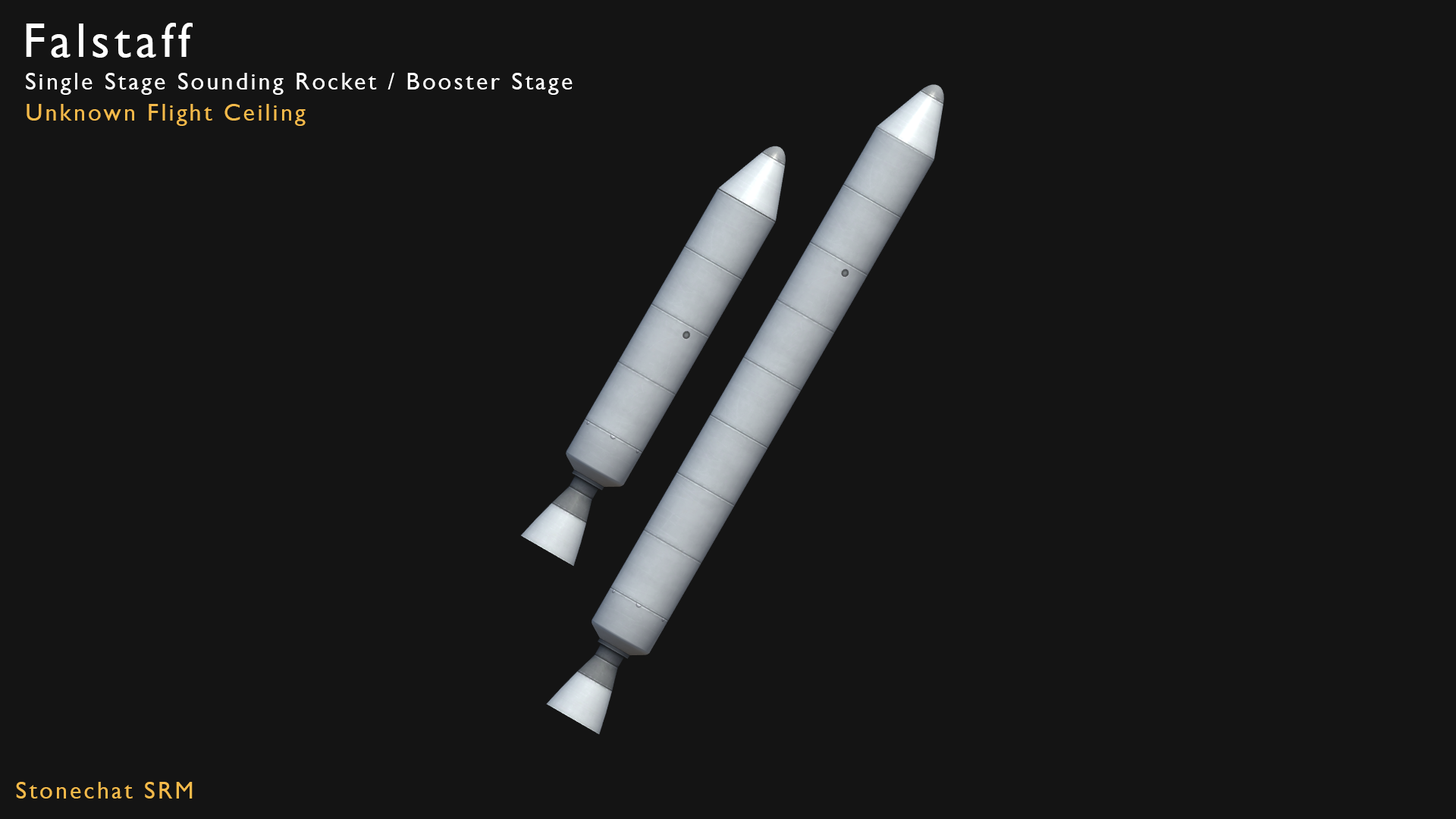
<style>
.page{position:relative;width:1456px;height:819px;background:#141414}
.page>*{position:absolute;margin:0}
.t1{font:48.5px "GillSansMT";letter-spacing:0.1em;color:#ffffff}
.t2{font:24.3px "GillSansMT";letter-spacing:0.1em;color:#ffffff}
.t3{font:24.3px "GillSansMT";letter-spacing:0.1em;color:#f4ba4a}
</style>
<div class="page">
<p class="t1" style="left:26px;top:23px;width:167px;height:35px">Falstaff</p>
<p class="t2" style="left:26px;top:73px;width:547px;height:22px">Single Stage Sounding Rocket / Booster Stage</p>
<p class="t3" style="left:27px;top:104px;width:279px;height:22px">Unknown Flight Ceiling</p>
<p class="t3" style="left:16px;top:782px;width:177px;height:17px">Stonechat SRM</p>
</div>
